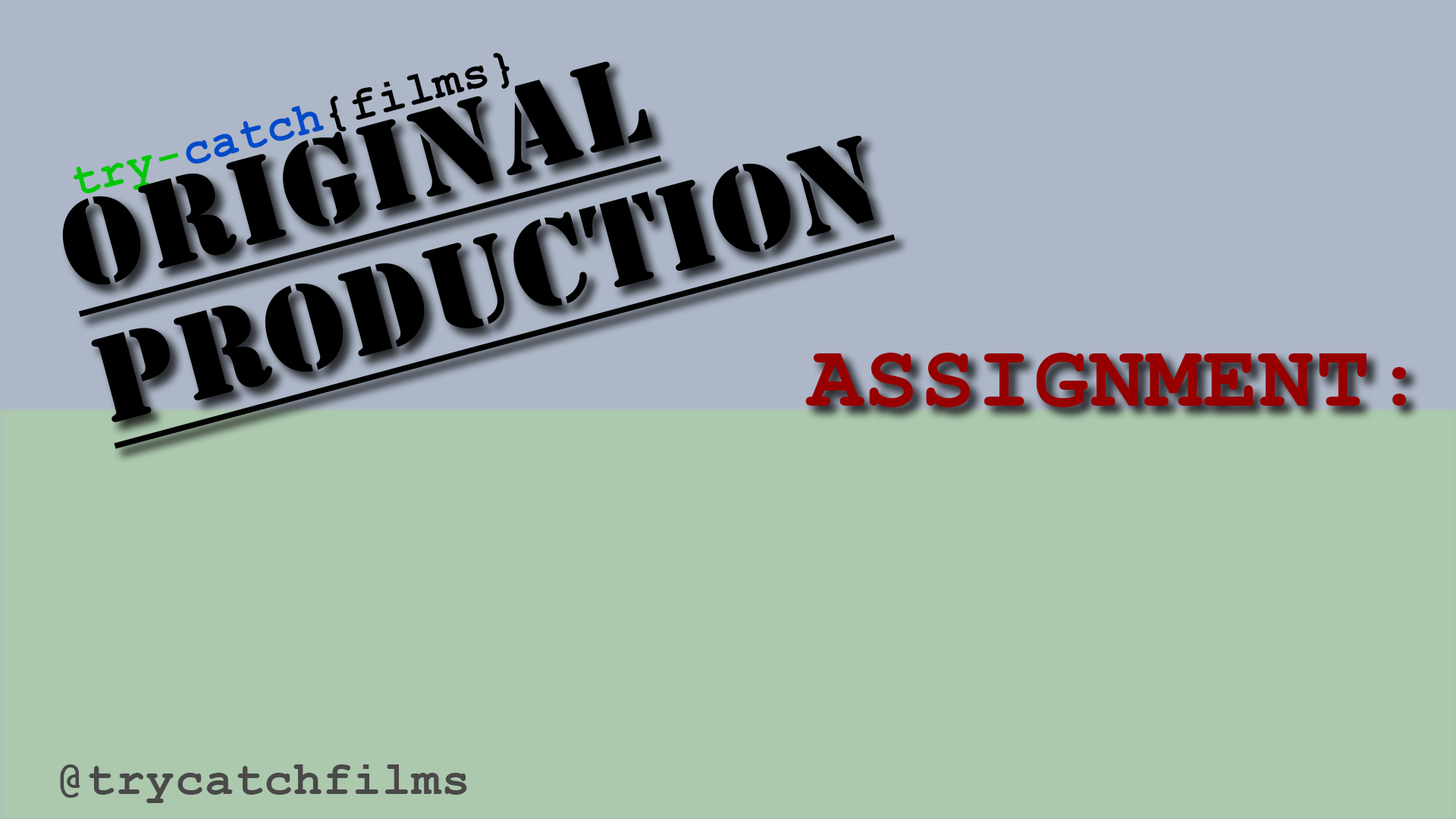
<style>
.page{position:relative;width:1456px;height:819px;background:#acc8ad}
.page>*{position:absolute;margin:0}
.t1{font:46.5px "CourierNewPS-BoldMT";letter-spacing:0.02em;color:#000000}
.t2{font:46.5px "CourierNewPS-BoldMT";letter-spacing:0.02em;color:#00c809}
.t3{font:46.5px "CourierNewPS-BoldMT";letter-spacing:0.02em;color:#004bc8}
.t4{font:113.7px "StencilStd";letter-spacing:0.02em;color:#000000;text-decoration:underline}
.t5{font:91px "CourierNewPS-BoldMT";letter-spacing:0.02em;color:#960000}
.t6{font:47.8px "CourierNewPS-BoldMT";letter-spacing:0.02em;color:#494949}
</style>
<div class="page">
<p class="t1" style="left:74px;top:52px;width:436px;height:141px;rotate:-15deg"><span class="t2">try-</span><span class="t3">catch</span>{films}</p>
<p class="t4" style="left:62px;top:61px;width:834px;height:388px;rotate:-15deg">Original<br>Production</p>
<p class="t5" style="left:805px;top:353px;width:602px;height:54px">ASSIGNMENT:</p>
<p class="t6" style="left:60px;top:764px;width:407px;height:39px">@trycatchfilms</p>
</div>
